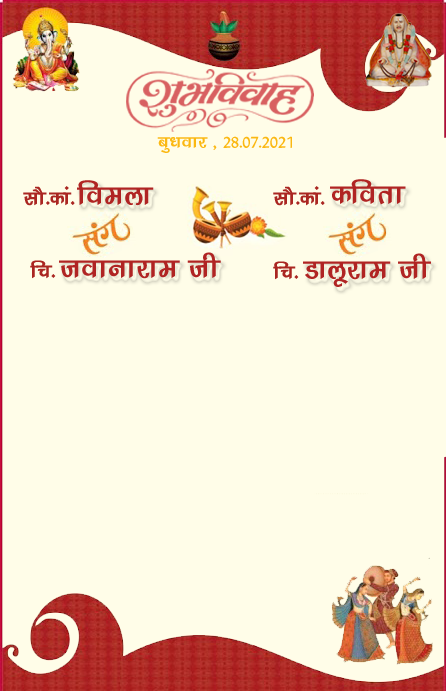
<style>
.page{position:relative;width:446px;height:691px;background:#fffde8}
.page>*{position:absolute;margin:0}
.t1{font:18.4px "KrutiDev240";color:#fbb812}
.t2{font:21px "KrutiDev240";color:#fbb812}
.t3{font:34px "KrutiDev240";color:#b02423}
.t4{font:24px "KrutiDev240";color:#aa2621}
</style>
<div class="page">
<p class="t1" style="left:157px;top:136px;width:135px;height:17px"><span class="t2"> cqèkokj ]</span> 28-07-2021</p>
<p class="t3" style="left:77px;top:180px;width:77px;height:26px">foeyk</p>
<p class="t3" style="left:330px;top:179px;width:76px;height:26px">dfork</p>
<p class="t4" style="left:23px;top:186px;width:52px;height:20px">lkS-dka-</p>
<p class="t4" style="left:273px;top:186px;width:52px;height:20px">lkS-dka-</p>
<p class="t3" style="left:59px;top:252px;width:162px;height:27px">tokukjke th</p>
<p class="t3" style="left:303px;top:253px;width:128px;height:34px">Mkywjke th</p>
<p class="t4" style="left:30px;top:260px;width:26px;height:19px">fp-</p>
<p class="t4" style="left:273px;top:261px;width:26px;height:19px">fp-</p>
</div>
